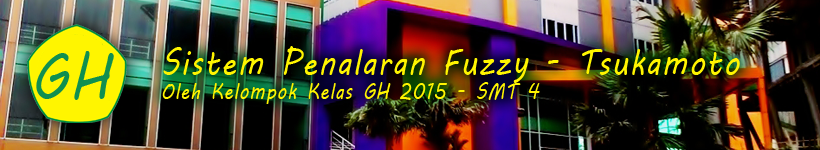
<style>
.page{position:relative;width:820px;height:150px}
.page>*{position:absolute;margin:0}
.t1{font:65.3px "MVBoli";letter-spacing:0.05em;color:#108f50;scale:0.83 1}
.t2{font:21.8px/24px "MVBoli";letter-spacing:0.05em;color:#fff500;scale:0.83 1}
.t3{font:36.3px/22px "MVBoli";letter-spacing:0.05em;color:#fff500;scale:0.83 1}
</style>
<div class="page">
<p class="t1" style="left:36px;top:51px;width:78px;height:49px">GH</p>
<p class="t2" style="left:162px;top:46px;width:578px;height:58px"><span class="t3">Sistem Penalaran Fuzzy - Tsukamoto<br></span>Oleh Kelompok Kelas GH 2015 - SMT 4</p>
</div>
